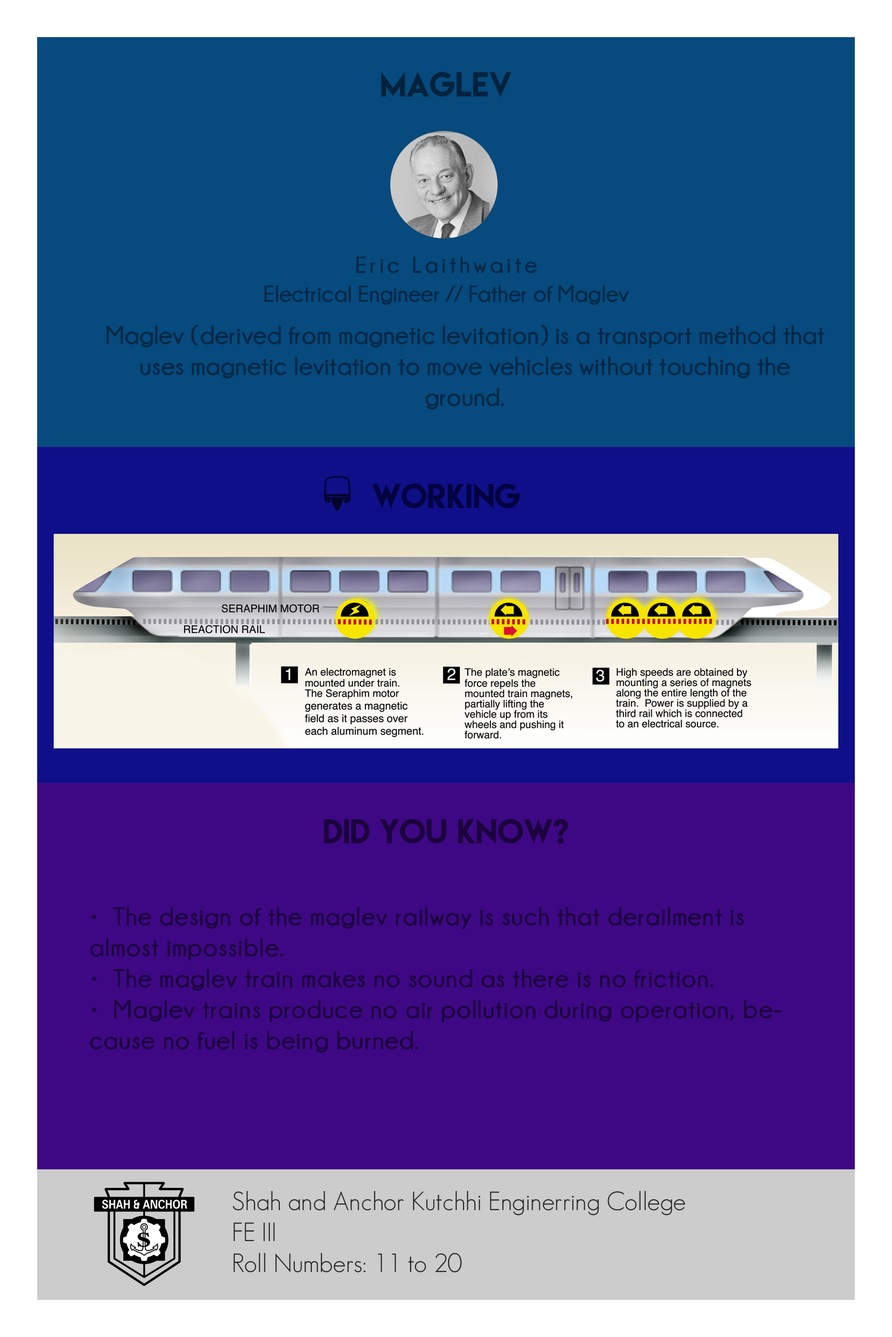
<style>
.page{position:relative;width:892px;height:1337px;background:#064a7e}
.page>*{position:absolute;margin:0}
.t1{font:31px "LemonMilk";color:#02233d}
.t2{font:23.2px "Champagne&Limousines-Bold";letter-spacing:0.14em;color:#022846}
.t3{font:23.2px "Champagne&Limousines-Bold";color:#022846}
.t4{font:25.8px "Champagne&Limousines-Bold";color:#022846}
.t5{font:31px "LemonMilk";color:#030342}
.t6{font:31px "LemonMilk";color:#1c023e}
.t7{font:25.8px "Champagne&Limousines-Bold";letter-spacing:0.02em;color:#1c023e}
.t8{font:25.8px "GeosansLight";color:#242424}
</style>
<div class="page">
<p class="t1" style="left:381px;top:72px;width:130px;height:25px">MAGLEV</p>
<p class="t2" style="left:356px;top:256px;width:181px;height:17px">Eric Laithwaite</p>
<p class="t3" style="left:264px;top:285px;width:365px;height:20px">Electrical Engineer // Father of Maglev</p>
<p class="t4" style="left:106px;top:325px;width:718px;height:85px;text-align:center">Maglev (derived from magnetic levitation) is a transport method that uses magnetic levitation to move vehicles without touching the ground.</p>
<p class="t5" style="left:372px;top:483px;width:148px;height:26px">WORKING</p>
<p class="t6" style="left:324px;top:819px;width:244px;height:25px">DID YOU KNOW?</p>
<p class="t7" style="left:90px;top:907px;width:691px;height:146px">•  The design of the maglev railway is such that derailment is              almost impossible.<br>•  The maglev train makes no sound as there is no friction.<br>•  Maglev trains produce no air pollution during operation, because no fuel is being burned.</p>
<p class="t8" style="left:233px;top:1191px;width:452px;height:82px">Shah and Anchor Kutchhi Enginerring College<br>FE III <br>Roll Numbers: 11 to 20</p>
</div>
